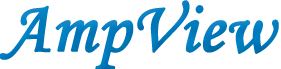
<style>
.page{position:relative;width:281px;height:69px;background:#ffffff}
.page>*{position:absolute;margin:0}
.t1{font:72px "MonotypeCorsiva";color:#0089c9;font-weight:bold}
</style>
<div class="page">
<p class="t1" style="left:0px;top:0px;width:279px;height:70px">AmpView</p>
</div>
